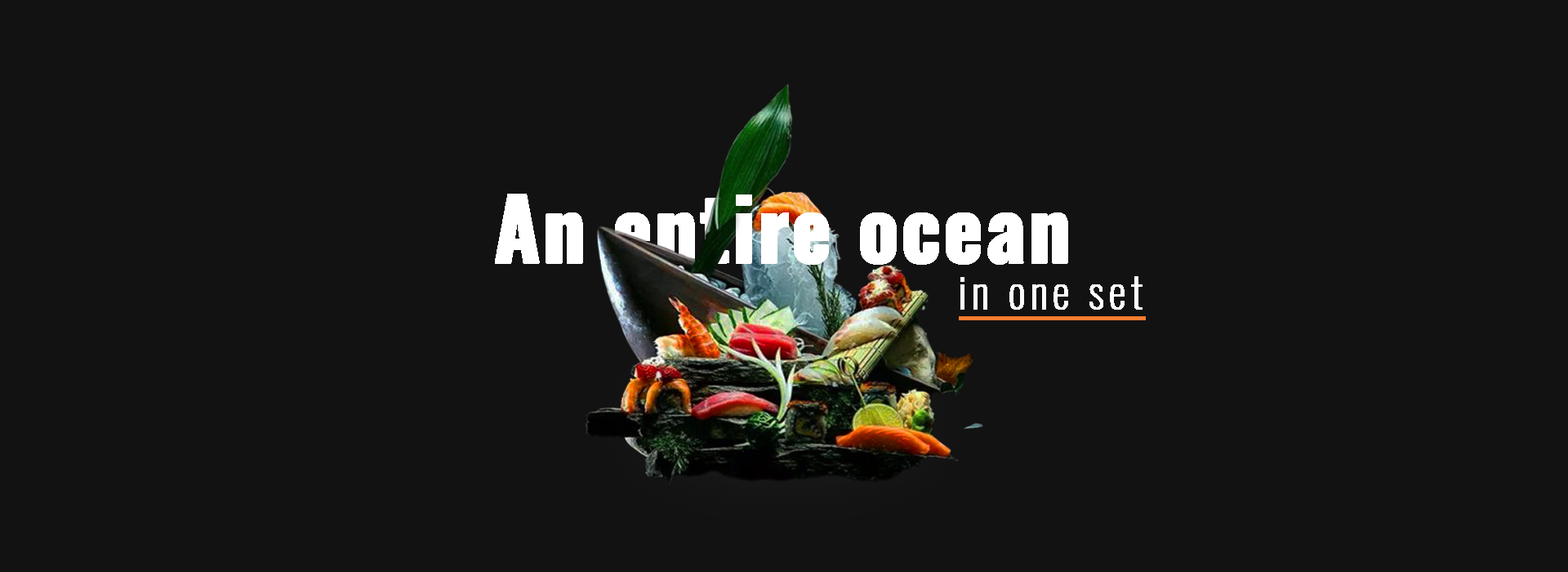
<style>
.page{position:relative;width:1568px;height:572px;background:#121212}
.page>*{position:absolute;margin:0}
.t1{font:83.2px "Oswald-Bold";letter-spacing:0.01em;color:#ffffff;font-weight:bold}
.t2{font:42.9px "Oswald-ExtraLight";letter-spacing:0.1em;color:#ffffff;font-weight:bold}
</style>
<div class="page">
<p class="t1" style="left:495px;top:194px;width:573px;height:71px">An entire ocean</p>
<p class="t2" style="left:960px;top:276px;width:183px;height:34px">in one set</p>
</div>
